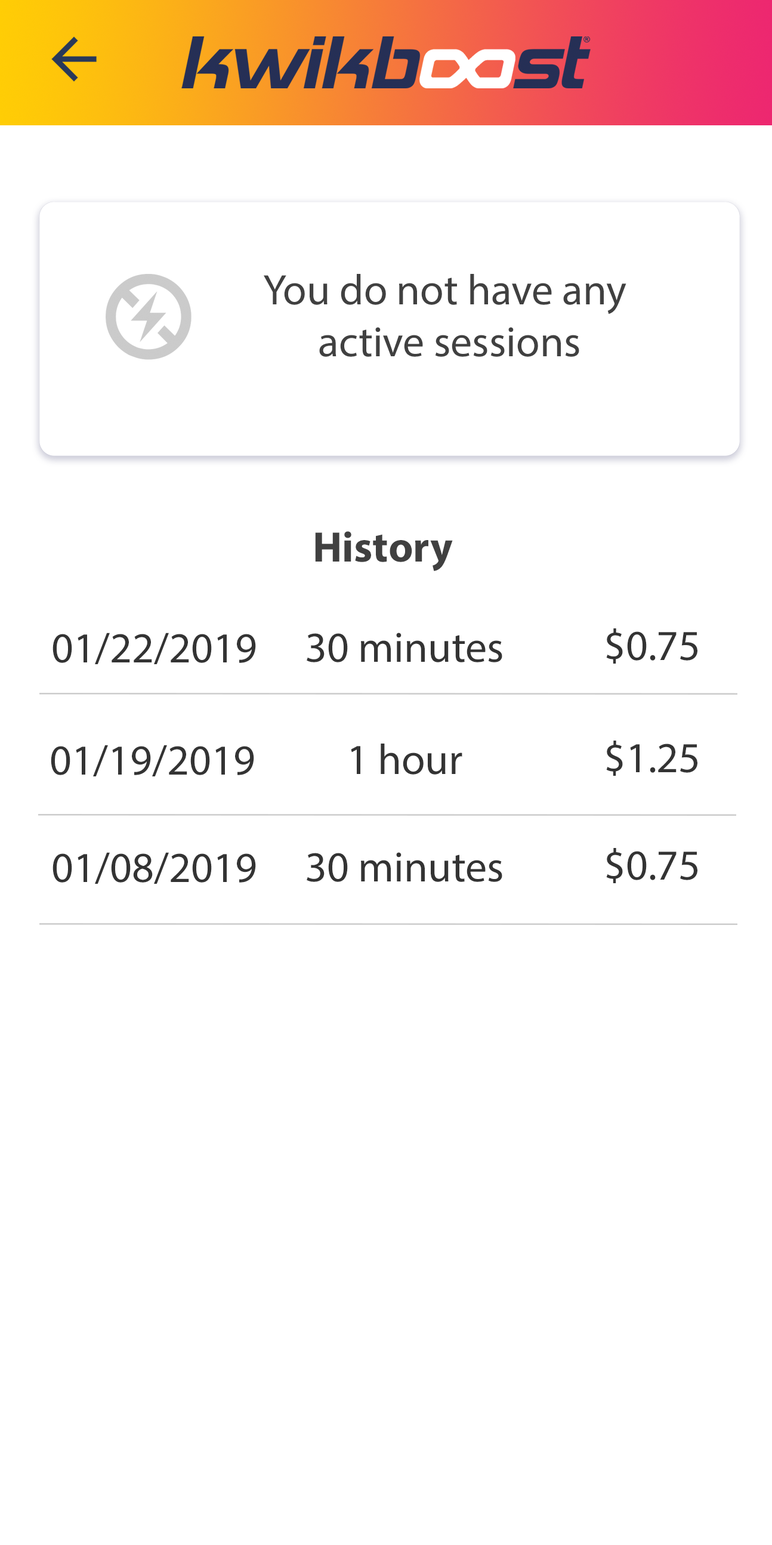
<style>
.page{position:relative;width:772px;height:1545px;background:#ffffff}
.page>*{position:absolute;margin:0}
.t1{font:43px "MyriadPro-Regular";color:#404040}
.t2{font:43px "MyriadPro-Bold";color:#404040}
.t3{font:43px "MyriadPro-Regular";color:#333333}
</style>
<div class="page">
<p class="t1" style="left:264px;top:274px;width:362px;height:83px;text-align:center">You do not have any <br>active sessions</p>
<p class="t2" style="left:315px;top:531px;width:138px;height:40px">History</p>
<p class="t3" style="left:606px;top:628px;width:91px;height:35px">$0.75</p>
<p class="t3" style="left:53px;top:632px;width:203px;height:32px">01/22/2019</p>
<p class="t3" style="left:307px;top:632px;width:195px;height:30px">30 minutes</p>
<p class="t3" style="left:51px;top:745px;width:203px;height:31px">01/19/2019</p>
<p class="t3" style="left:351px;top:743px;width:111px;height:31px">1 hour</p>
<p class="t3" style="left:606px;top:740px;width:91px;height:36px">$1.25</p>
<p class="t3" style="left:53px;top:852px;width:203px;height:32px">01/08/2019</p>
<p class="t3" style="left:307px;top:852px;width:195px;height:30px">30 minutes</p>
<p class="t3" style="left:606px;top:848px;width:91px;height:35px">$0.75</p>
</div>
